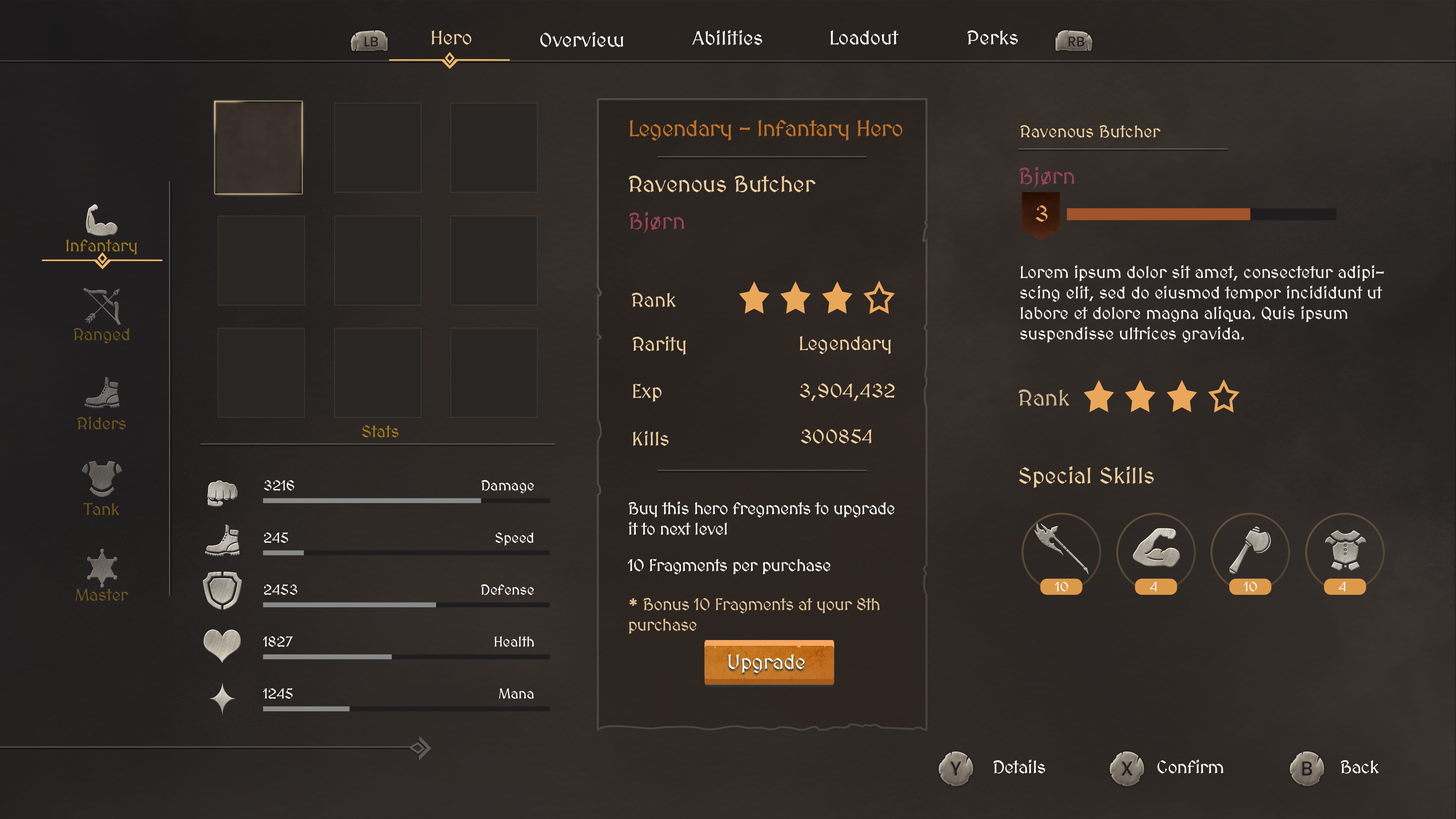
<style>
.page{position:relative;width:1456px;height:819px}
.page>*{position:absolute;margin:0}
.t1{font:19.8px "MedievalSharp";color:#ffffff}
.t2{font:19.8px "MedievalSharp";color:#ecce9f}
.t3{font:22.7px "MedievalSharp";letter-spacing:-0.02em;color:#c07124}
.t4{font:17.1px "MedievalSharp";color:#ecce9f}
.t5{font:22.7px "MedievalSharp";color:#924552}
.t6{font:22.7px "MedievalSharp";color:#ecce9f}
.t7{font:22.7px "MedievalSharp";color:#eaa759}
.t8{font:17.1px "MedievalSharp";color:#9f7b1c}
.t9{font:17.1px "MedievalSharp";color:#ffffff}
.t10{font:19.7px "MedievalSharp";color:#ecce9f}
.t11{font:17.1px "MedievalSharp";color:#6c541d}
.t12{font:22.7px "MedievalSharp";color:#cdb38b}
.t13{font:14.5px "MedievalSharp";color:#ffffff}
.t14{font:17.1px "MedievalSharp";letter-spacing:-0.02em;color:#ffffff}
.t15{font:13.6px "MedievalSharp";color:#ffffff}
.t16{font:17.1px "MedievalSharp";color:#6d551f}
.t17{font:17.1px "MedievalSharp";letter-spacing:-0.02em;color:#dfc296}
.t18{font:20.5px "MedievalSharp";color:#e5fbfd}
.t19{font:18.2px "MedievalSharp";letter-spacing:-0.02em;color:#ffffff}
</style>
<div class="page">
<p class="t1" style="left:692px;top:30px;width:70px;height:15px">Abilities</p>
<p class="t2" style="left:431px;top:30px;width:40px;height:15px">Hero</p>
<p class="t1" style="left:540px;top:32px;width:83px;height:15px">Overview</p>
<p class="t1" style="left:830px;top:30px;width:69px;height:15px">Loadout</p>
<p class="t1" style="left:967px;top:30px;width:51px;height:15px">Perks</p>
<p class="t3" style="left:630px;top:120px;width:272px;height:21px">Legendary - Infantary Hero</p>
<p class="t4" style="left:1020px;top:125px;width:141px;height:13px">Ravenous Butcher</p>
<p class="t5" style="left:1019px;top:166px;width:56px;height:22px">Bjørn</p>
<p class="t6" style="left:629px;top:176px;width:187px;height:16px">Ravenous Butcher</p>
<p class="t7" style="left:1035px;top:205px;width:13px;height:17px">3</p>
<p class="t5" style="left:629px;top:212px;width:55px;height:22px">Bjørn</p>
<p class="t8" style="left:66px;top:239px;width:71px;height:16px">Infantary</p>
<p class="t9" style="left:1020px;top:265px;width:364px;height:78px">Lorem ipsum dolor sit amet, consectetur adipiscing elit, sed do eiusmod tempor incididunt ut labore et dolore magna aliqua. Quis ipsum suspendisse ultrices gravida.</p>
<p class="t10" style="left:632px;top:293px;width:44px;height:14px">Rank</p>
<p class="t11" style="left:74px;top:328px;width:55px;height:16px">Ranged</p>
<p class="t10" style="left:632px;top:336px;width:54px;height:19px">Rarity</p>
<p class="t10" style="left:800px;top:336px;width:91px;height:18px">Legendary</p>
<p class="t10" style="left:633px;top:384px;width:29px;height:18px">Exp</p>
<p class="t10" style="left:800px;top:383px;width:95px;height:18px">3,904,432</p>
<p class="t12" style="left:1018px;top:389px;width:52px;height:17px">Rank</p>
<p class="t11" style="left:77px;top:416px;width:49px;height:14px">Riders</p>
<p class="t8" style="left:362px;top:425px;width:36px;height:13px">Stats</p>
<p class="t10" style="left:633px;top:431px;width:35px;height:15px">Kills</p>
<p class="t10" style="left:801px;top:429px;width:71px;height:15px">300854</p>
<p class="t6" style="left:1019px;top:466px;width:135px;height:22px">Special Skills</p>
<p class="t13" style="left:264px;top:480px;width:30px;height:11px">3216</p>
<p class="t13" style="left:481px;top:480px;width:53px;height:13px">Damage</p>
<p class="t11" style="left:83px;top:503px;width:36px;height:12px">Tank</p>
<p class="t14" style="left:629px;top:501px;width:265px;height:34px">Buy this hero fregments to upgrade it to next level</p>
<p class="t13" style="left:264px;top:532px;width:24px;height:11px">245</p>
<p class="t13" style="left:495px;top:532px;width:38px;height:14px">Speed</p>
<p class="t14" style="left:627px;top:559px;width:203px;height:15px">10 Fragments per purchase</p>
<p class="t15" style="left:1055px;top:582px;width:13px;height:9px">10</p>
<p class="t15" style="left:1150px;top:582px;width:7px;height:9px">4</p>
<p class="t15" style="left:1244px;top:582px;width:13px;height:9px">10</p>
<p class="t15" style="left:1339px;top:582px;width:7px;height:9px">4</p>
<p class="t16" style="left:75px;top:588px;width:54px;height:13px">Master</p>
<p class="t13" style="left:264px;top:584px;width:33px;height:11px">2453</p>
<p class="t13" style="left:481px;top:584px;width:53px;height:11px">Defense</p>
<p class="t17" style="left:629px;top:598px;width:251px;height:36px">* Bonus 10 Fragments at your 8th purchase</p>
<p class="t13" style="left:263px;top:636px;width:30px;height:11px">1827</p>
<p class="t13" style="left:494px;top:636px;width:40px;height:11px">Health</p>
<p class="t18" style="left:728px;top:654px;width:77px;height:19px">Upgrade</p>
<p class="t13" style="left:263px;top:688px;width:30px;height:11px">1245</p>
<p class="t13" style="left:499px;top:688px;width:35px;height:11px">Mana</p>
<p class="t19" style="left:993px;top:759px;width:52px;height:14px">Details</p>
<p class="t19" style="left:1157px;top:759px;width:67px;height:14px">Confirm</p>
<p class="t19" style="left:1341px;top:760px;width:38px;height:13px">Back</p>
</div>
